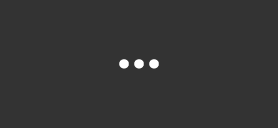
<style>
.page{position:relative;width:278px;height:128px;background:#333333}
.page>*{position:absolute;margin:0}
.t1{font:56px "ProductSans-Bold";color:#ffffff}
</style>
<div class="page">
<p class="t1" style="left:119px;top:59px;width:40px;height:10px">...</p>
</div>
